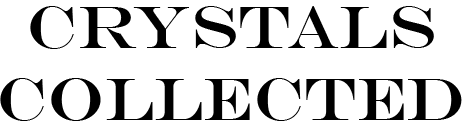
<style>
.page{position:relative;width:465px;height:128px;background:#ffffff}
.page>*{position:absolute;margin:0}
.t1{font:60px "EngraversMT";color:#000000}
</style>
<div class="page">
<p class="t1" style="left:0px;top:6px;width:462px;height:115px;text-align:center">cRYSTALS<br>cOLLECTED</p>
</div>
